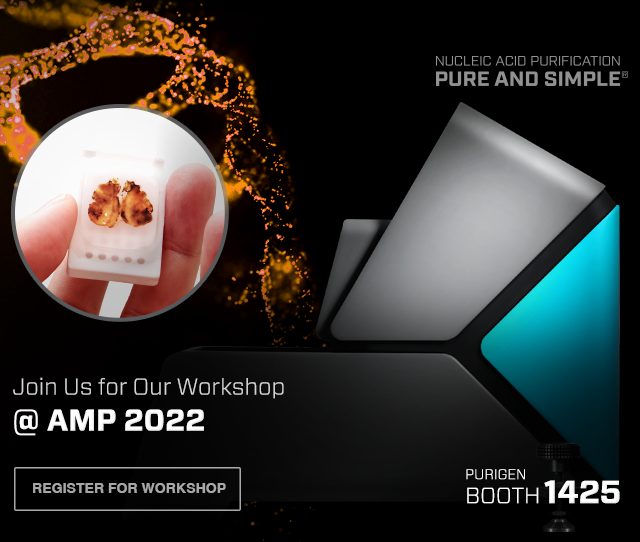
<style>
.page{position:relative;width:640px;height:542px;background:#000000}
.page>*{position:absolute;margin:0}
.t1{font:23px/36px "Forza-Light";color:#d4d4d4}
.t2{font:30px/36px "Forza-Bold";color:#ffffff}
.t3{font:14px/24px "Forza-Light";color:#ffffff}
.t4{font:22px/24px "Forza-Light";color:#ffffff}
.t5{font:14.3px "Helvetica-Bold";letter-spacing:-0.01em;color:#a6a6a6;text-transform:uppercase}
.t6{font:32px "Forza-Bold";letter-spacing:-0.015em;color:#ffffff}
</style>
<div class="page">
<p class="t1" style="left:13px;top:377px;width:271px;height:59px">Join Us for Our Workshop<br><span class="t2">@ AMP 2022</span></p>
<p class="t3" style="left:466px;top:469px;width:73px;height:35px">PURIGEN<br><span class="t4">BOOTH</span></p>
<p class="t5" style="left:33px;top:483px;width:193px;height:10px">REGISTER FOR WORKSHOP</p>
<p class="t6" style="left:544px;top:480px;width:76px;height:24px">1425</p>
</div>
